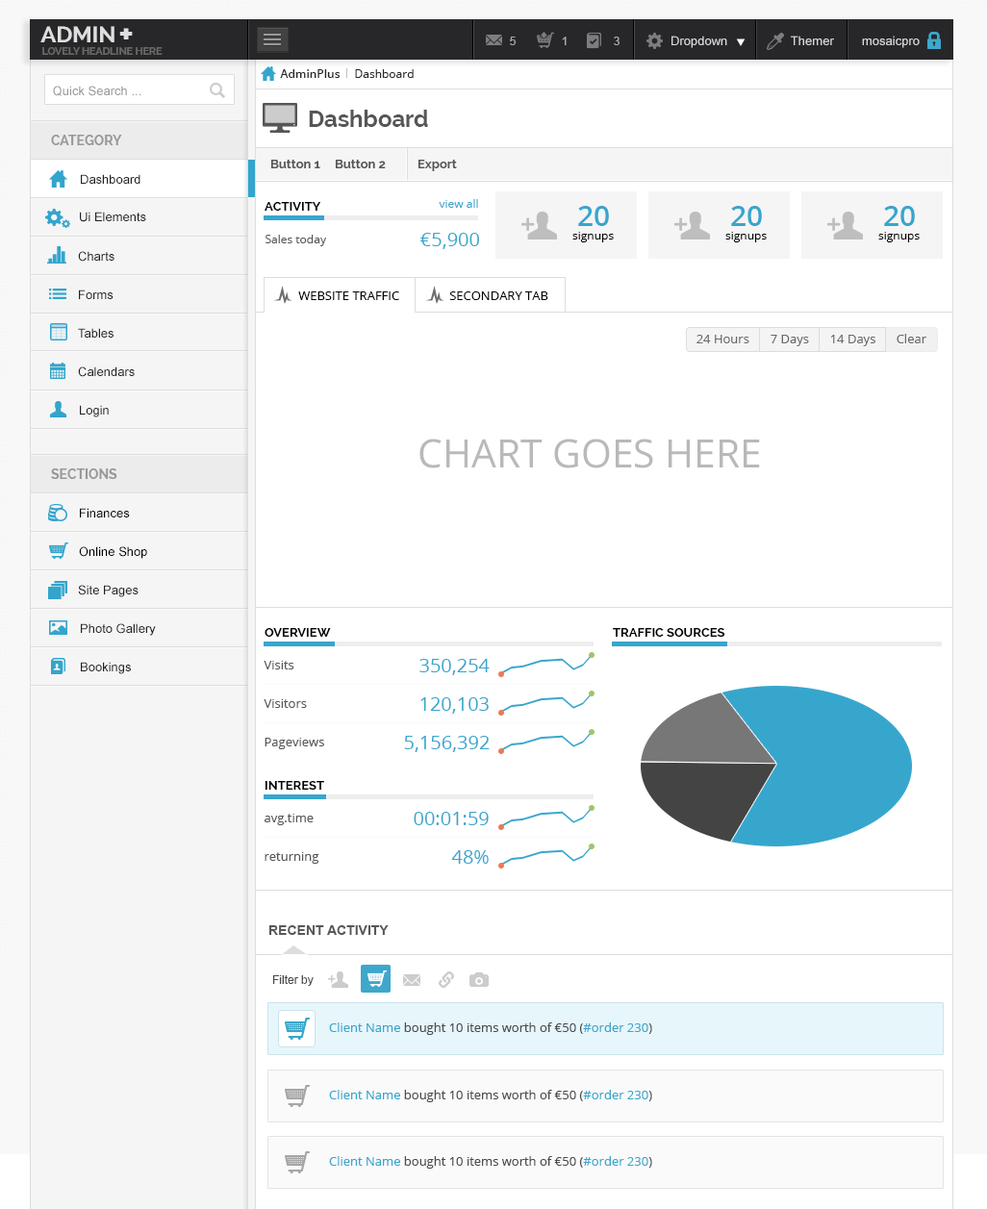
<style>
.page{position:relative;width:987px;height:1209px;background:#ffffff}
.page>*{position:absolute;margin:0}
.t1{font:22.2px "Raleway-Bold";color:#dedede;text-transform:uppercase}
.t2{font:35.6px "Raleway-Bold";color:#dedede}
.t3{font:11.5px "ArialMT";color:#a9a9a9}
.t4{font:12.5px "ArialMT";color:#d9d9d9}
.t5{font:10.6px "Raleway-Bold";color:#686869;text-transform:uppercase;scale:0.97 1}
.t6{font:11.5px "OpenSans-Semibold";color:#272729}
.t7{font:11.5px "OpenSans";color:#272729}
.t8{font:12.5px "ArialMT";color:#999999}
.t9{font:23.1px "Raleway-Bold";color:#575655}
.t10{font:13.5px "Raleway-Bold";color:#989898;text-transform:uppercase}
.t11{font:12.5px "Raleway-Bold";color:#575655}
.t12{font:12.5px "ArialMT";color:#222222}
.t13{font:12.5px "Raleway-Bold";color:#000000;text-transform:uppercase}
.t14{font:11.5px "OpenSans";color:#37a6cd}
.t15{font:28.9px "OpenSans-Semibold";color:#37a6cd}
.t16{font:19.2px "OpenSans";color:#37a6cd}
.t17{font:11.5px "OpenSans";color:#000000}
.t18{font:11.5px "OpenSans";color:#585756}
.t19{font:12.5px "OpenSans";color:#000000;text-transform:uppercase}
.t20{font:12.5px "OpenSans";color:#676767}
.t21{font:12.5px "OpenSans"}
.t22{font:39.2px "OpenSans";color:#b9b9b9;text-transform:uppercase}
.t23{font:12.5px "ArialMT";color:#000000}
.t24{font:12.5px "OpenSans";color:#585756}
.t25{font:13.5px "Arial-BoldMT";color:#585858}
.t26{font:11.5px "ArialMT";color:#4b4b4b}
.t27{font:12.5px "OpenSans";color:#484c50}
.t28{font:12.5px "OpenSans";color:#37a7cd}
</style>
<div class="page">
<p class="t1" style="left:40px;top:26px;width:74px;height:16px">Admin</p>
<p class="t2" style="left:119px;top:28px;width:14px;height:11px">+</p>
<p class="t3" style="left:510px;top:37px;width:5px;height:8px">5</p>
<p class="t3" style="left:562px;top:37px;width:4px;height:8px">1</p>
<p class="t3" style="left:613px;top:37px;width:6px;height:8px">3</p>
<p class="t4" style="left:671px;top:36px;width:56px;height:12px">Dropdown</p>
<p class="t4" style="left:790px;top:36px;width:44px;height:9px">Themer</p>
<p class="t4" style="left:862px;top:36px;width:57px;height:12px">mosaicpro</p>
<p class="t5" style="left:42px;top:47px;width:121px;height:8px">LOVELY HEADLINE HERE</p>
<p class="t6" style="left:280px;top:69px;width:60px;height:9px">AdminPlus</p>
<p class="t7" style="left:355px;top:69px;width:58px;height:9px">Dashboard</p>
<p class="t8" style="left:53px;top:86px;width:88px;height:10px">Quick Search ...</p>
<p class="t9" style="left:309px;top:110px;width:119px;height:17px">Dashboard</p>
<p class="t10" style="left:51px;top:135px;width:71px;height:10px">Category</p>
<p class="t11" style="left:270px;top:160px;width:50px;height:8px">Button 1</p>
<p class="t11" style="left:335px;top:160px;width:51px;height:8px">Button 2</p>
<p class="t11" style="left:417px;top:160px;width:40px;height:11px">Export</p>
<p class="t12" style="left:81px;top:174px;width:59px;height:10px">Dashboard</p>
<p class="t13" style="left:264px;top:202px;width:57px;height:9px">ACTIVITY</p>
<p class="t14" style="left:438px;top:199px;width:40px;height:9px">view all</p>
<p class="t15" style="left:578px;top:206px;width:31px;height:20px">20</p>
<p class="t15" style="left:731px;top:206px;width:31px;height:20px">20</p>
<p class="t15" style="left:884px;top:206px;width:30px;height:20px">20</p>
<p class="t12" style="left:80px;top:212px;width:66px;height:10px">Ui Elements</p>
<p class="t16" style="left:420px;top:233px;width:59px;height:16px">€5,900</p>
<p class="t17" style="left:572px;top:232px;width:41px;height:10px">signups</p>
<p class="t17" style="left:725px;top:232px;width:41px;height:10px">signups</p>
<p class="t17" style="left:878px;top:232px;width:41px;height:10px">signups</p>
<p class="t18" style="left:265px;top:235px;width:61px;height:11px">Sales today</p>
<p class="t12" style="left:78px;top:251px;width:36px;height:11px">Charts</p>
<p class="t12" style="left:79px;top:289px;width:34px;height:10px">Forms</p>
<p class="t19" style="left:298px;top:291px;width:101px;height:9px">WEBSITE TRAFFIC</p>
<p class="t19" style="left:449px;top:291px;width:99px;height:9px">SECONDARY TAB</p>
<p class="t12" style="left:78px;top:328px;width:35px;height:10px">Tables</p>
<p class="t20" style="left:696px;top:335px;width:53px;height:8px">24 Hours</p>
<p class="t21" style="left:770px;top:336px;width:39px;height:11px">7 Days</p>
<p class="t20" style="left:770px;top:335px;width:39px;height:11px">7 Days</p>
<p class="t21" style="left:830px;top:336px;width:45px;height:11px">14 Days</p>
<p class="t20" style="left:830px;top:335px;width:45px;height:11px">14 Days</p>
<p class="t20" style="left:896px;top:334px;width:30px;height:9px">Clear</p>
<p class="t12" style="left:78px;top:366px;width:57px;height:11px">Calendars</p>
<p class="t12" style="left:80px;top:405px;width:29px;height:12px">Login</p>
<p class="t22" style="left:419px;top:438px;width:341px;height:30px">CHART GOES HERE</p>
<p class="t10" style="left:51px;top:468px;width:66px;height:11px">SECTIONS</p>
<p class="t23" style="left:80px;top:508px;width:50px;height:9px">Finances</p>
<p class="t23" style="left:79px;top:546px;width:68px;height:13px">Online Shop</p>
<p class="t12" style="left:78px;top:585px;width:60px;height:12px">Site Pages</p>
<p class="t12" style="left:81px;top:623px;width:75px;height:13px">Photo Gallery</p>
<p class="t13" style="left:264px;top:628px;width:67px;height:9px">Overview</p>
<p class="t13" style="left:613px;top:628px;width:112px;height:9px">TRAFFIC SOURCES</p>
<p class="t12" style="left:81px;top:662px;width:50px;height:12px">Bookings</p>
<p class="t24" style="left:263px;top:661px;width:31px;height:8px">Visits</p>
<p class="t16" style="left:419px;top:659px;width:70px;height:16px">350,254</p>
<p class="t24" style="left:263px;top:699px;width:44px;height:9px">Visitors</p>
<p class="t16" style="left:420px;top:697px;width:68px;height:16px">120,103</p>
<p class="t24" style="left:264px;top:738px;width:60px;height:11px">Pageviews</p>
<p class="t16" style="left:404px;top:736px;width:85px;height:16px">5,156,392</p>
<p class="t13" style="left:264px;top:781px;width:60px;height:8px">INTEREST</p>
<p class="t24" style="left:264px;top:813px;width:49px;height:12px">avg.time</p>
<p class="t16" style="left:413px;top:812px;width:75px;height:13px">00:01:59</p>
<p class="t24" style="left:264px;top:852px;width:55px;height:11px">returning</p>
<p class="t16" style="left:451px;top:850px;width:37px;height:13px">48%</p>
<p class="t25" style="left:268px;top:925px;width:120px;height:10px">RECENT ACTIVITY</p>
<p class="t26" style="left:272px;top:975px;width:41px;height:11px">Filter by</p>
<p class="t27" style="left:329px;top:1022px;width:323px;height:13px"><span class="t28">Client Name</span> bought 10 items worth of €50 (<span class="t28">#order 230</span>)</p>
<p class="t27" style="left:329px;top:1089px;width:323px;height:13px"><span class="t28">Client Name</span> bought 10 items worth of €50 (<span class="t28">#order 230</span>)</p>
<p class="t27" style="left:329px;top:1156px;width:323px;height:12px"><span class="t28">Client Name</span> bought 10 items worth of €50 (<span class="t28">#order 230</span>)</p>
</div>
